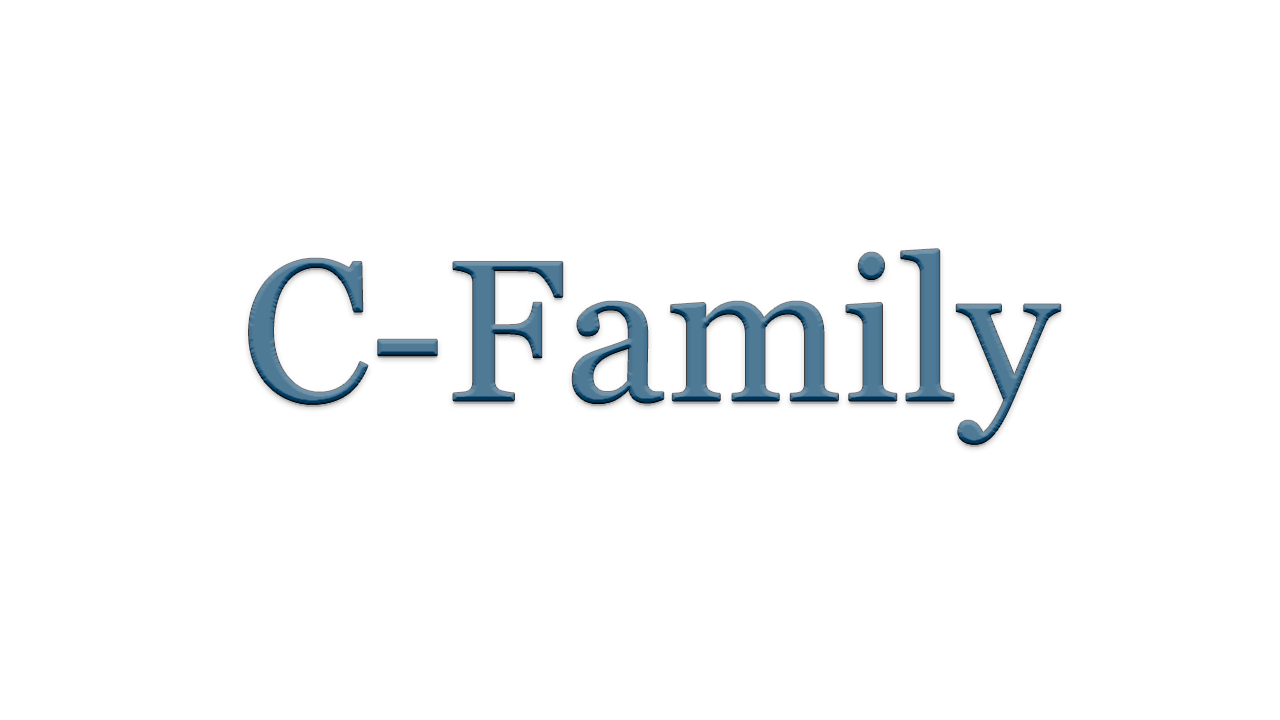
<style>
.page{position:relative;width:1280px;height:720px;background:#ffffff}
.page>*{position:absolute;margin:0}
.t1{font:200px "Georgia";letter-spacing:0.001em;color:#4f7a95}
</style>
<div class="page">
<p class="t1" style="left:249px;top:249px;width:812px;height:195px">C-Family</p>
</div>
